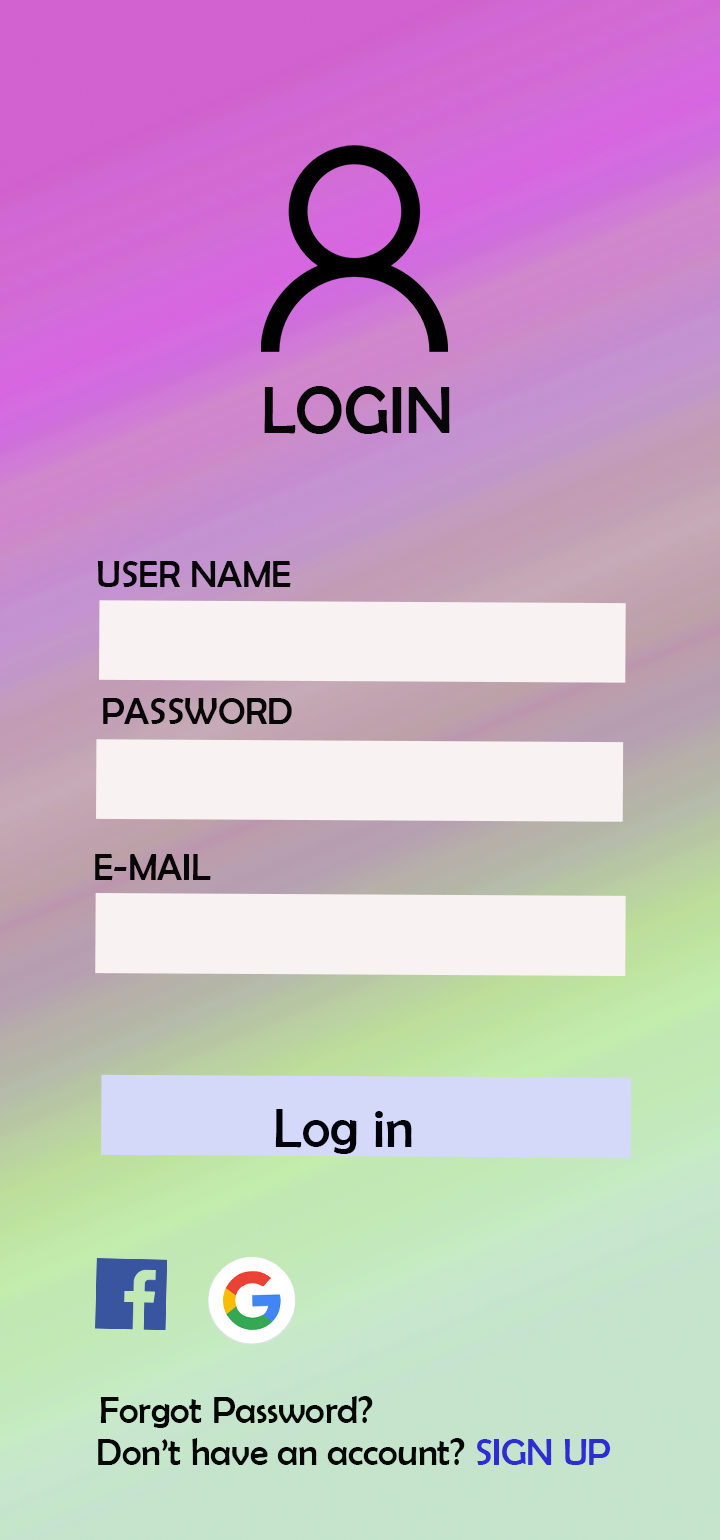
<style>
.page{position:relative;width:720px;height:1540px}
.page>*{position:absolute;margin:0}
.t1{font:66.7px "BerlinSansFB-Reg";color:#080707}
.t2{font:37.5px "BerlinSansFB-Reg";color:#080707}
.t3{font:55.2px "BerlinSansFB-Reg";color:#01020a}
.t4{font:45.2px "BerlinSansFB-Reg";color:#01020a}
.t5{font:37.5px "BerlinSansFB-Reg";color:#2d2dd3}
</style>
<div class="page">
<p class="t1" style="left:264px;top:386px;width:186px;height:48px">LOGIN</p>
<p class="t2" style="left:97px;top:561px;width:194px;height:27px">USER NAME</p>
<p class="t2" style="left:103px;top:698px;width:189px;height:26px">PASSWORD</p>
<p class="t2" style="left:95px;top:854px;width:116px;height:27px">E-MAIL</p>
<p class="t3" style="left:275px;top:1109px;width:137px;height:45px"><span class="t4"><br></span>Log in</p>
<p class="t2" style="left:100px;top:1396px;width:273px;height:32px">Forgot Password?</p>
<p class="t2" style="left:98px;top:1438px;width:512px;height:27px">Don’t have an account? <span class="t5">SIGN UP</span></p>
</div>
